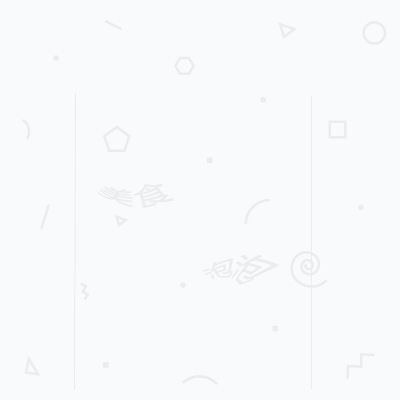
<style>
.page{position:relative;width:400px;height:400px;background:#f9fafb}
.page>*{position:absolute;margin:0}
.t1{font:20.3px "MicrosoftYaHei";color:#ebeced;scale:1.23 1}
.t2{font:17.1px "MicrosoftYaHei";color:#ebeced}
</style>
<div class="page">
<p class="t1" style="left:97px;top:183px;width:77px;height:26px">美食</p>
<p class="t2" style="left:203px;top:254px;width:77px;height:31px;text-align:center">泡泡</p>
</div>
